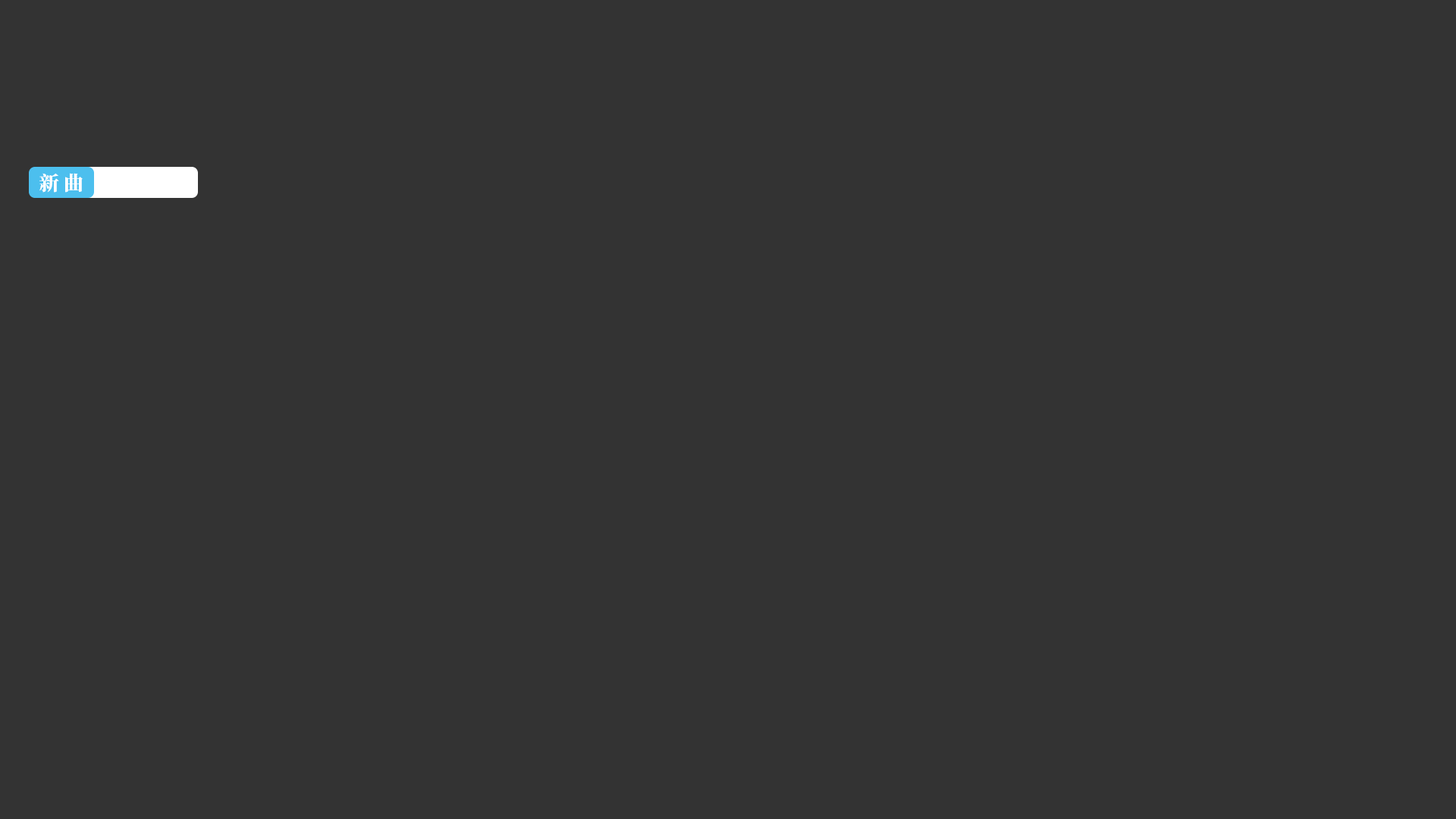
<style>
.page{position:relative;width:1456px;height:819px;background:#333333}
.page>*{position:absolute;margin:0}
.t1{font:19.7px "SourceHanSerifCN-Heavy";letter-spacing:0.01em;color:#ffffff}
</style>
<div class="page">
<p class="t1" style="left:39px;top:173px;width:44px;height:20px">新 曲</p>
</div>
